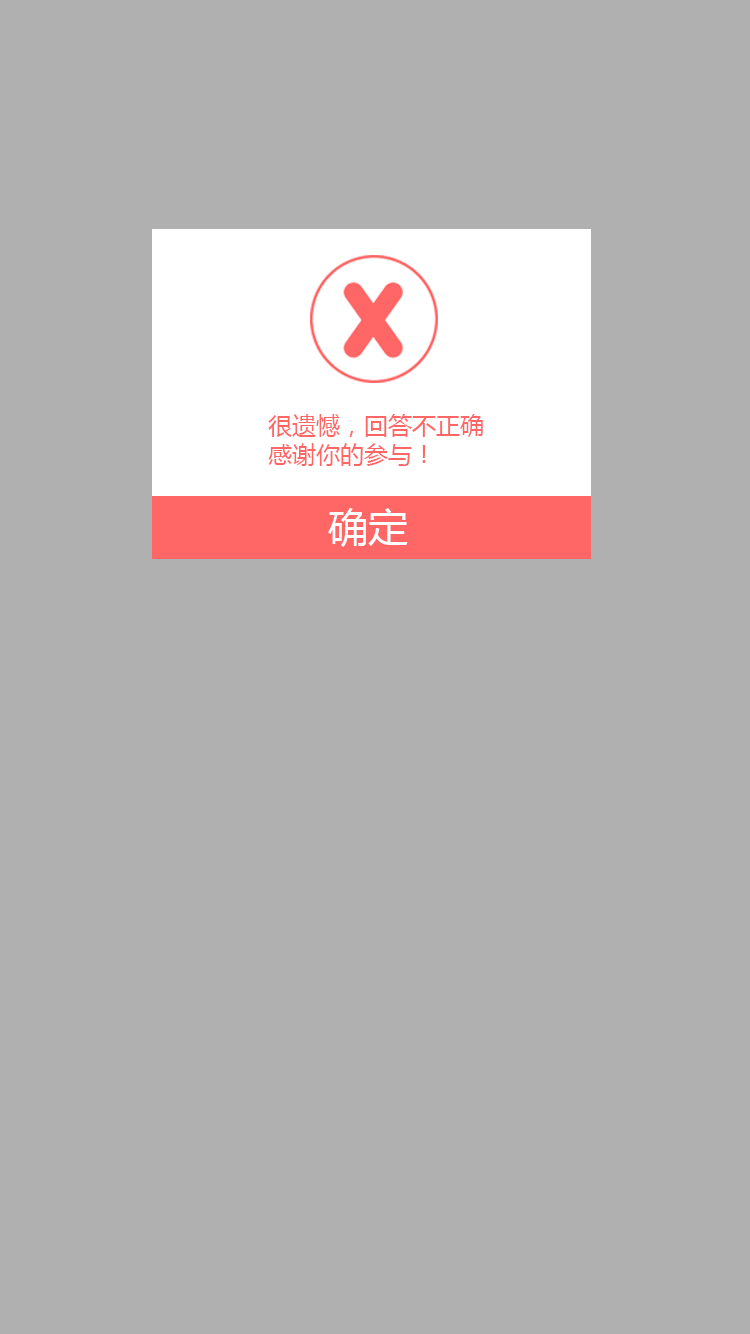
<style>
.page{position:relative;width:750px;height:1334px;background:#b0b0b0}
.page>*{position:absolute;margin:0}
.t1{font:24px "MicrosoftYaHei";color:#ff6666}
.t2{font:40px "MicrosoftYaHei";color:#ffffff}
</style>
<div class="page">
<p class="t1" style="left:268px;top:414px;width:215px;height:52px">很遗憾，回答不正确<br>感谢你的参与！</p>
<p class="t2" style="left:328px;top:508px;width:80px;height:39px">确定</p>
</div>
